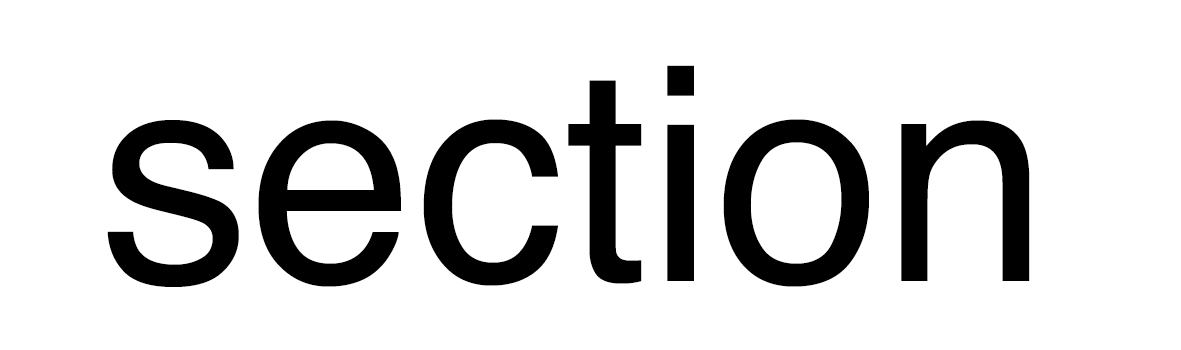
<style>
.page{position:relative;width:1181px;height:350px;background:#ffffff}
.page>*{position:absolute;margin:0}
.t1{font:300px "Helvetica";color:#000000}
</style>
<div class="page">
<p class="t1" style="left:107px;top:65px;width:923px;height:222px">section</p>
</div>
